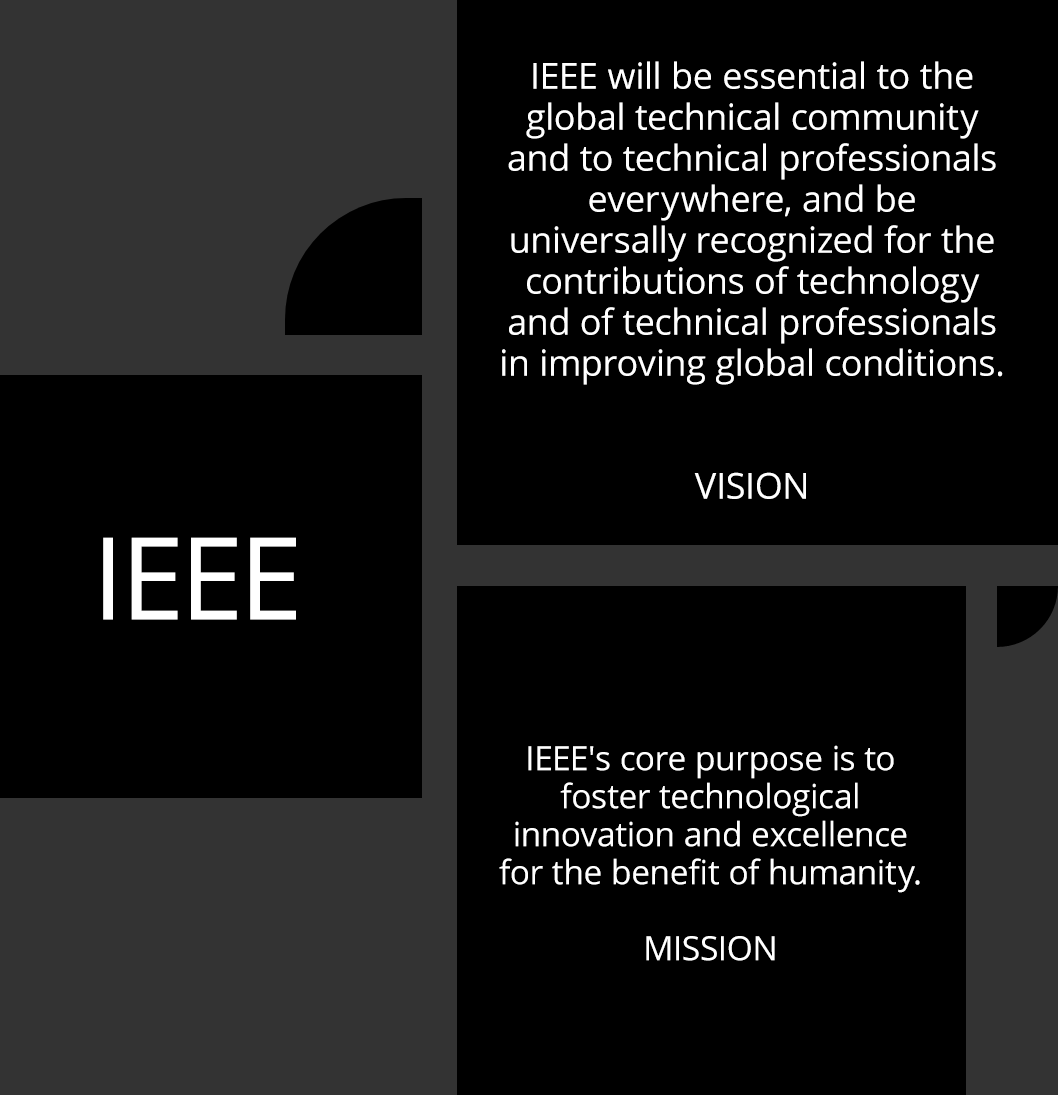
<style>
.page{position:relative;width:1058px;height:1095px;background:#000000}
.page>*{position:absolute;margin:0}
.t1{font:36px/41px "OpenSans";color:#ffffff}
.t2{font:114px "OpenSans";color:#ffffff}
.t3{font:33.4px/38px "OpenSans";color:#ffffff}
</style>
<div class="page">
<p class="t1" style="left:502px;top:61px;width:501px;height:438px;text-align:center">IEEE will be essential to the global technical community and to technical professionals everywhere, and be universally recognized for the contributions of technology and of technical professionals in improving global conditions.<br><br><br>VISION</p>
<p class="t2" style="left:103px;top:537px;width:193px;height:83px">IEEE</p>
<p class="t3" style="left:499px;top:745px;width:421px;height:216px;text-align:center">IEEE's core purpose is to foster technological innovation and excellence for the benefit of humanity.<br><br>MISSION</p>
</div>
